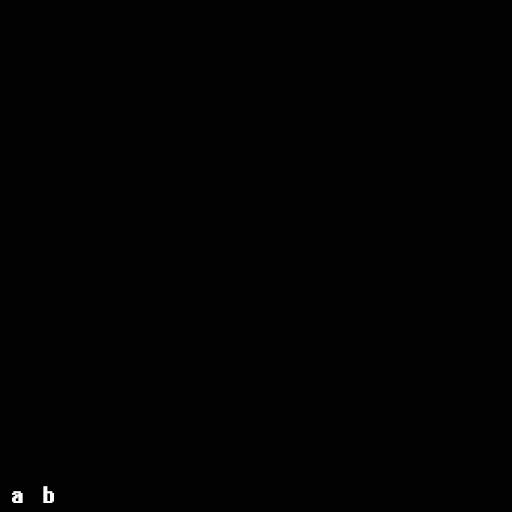
<style>
.page{position:relative;width:512px;height:512px;background:#020202}
.page>*{position:absolute;margin:0}
.t1{font:21px "System";color:#ffffff;font-weight:bold}
</style>
<div class="page">
<p class="t1" style="left:43px;top:486px;width:11px;height:17px">b</p>
<p class="t1" style="left:12px;top:491px;width:11px;height:12px">a</p>
</div>
